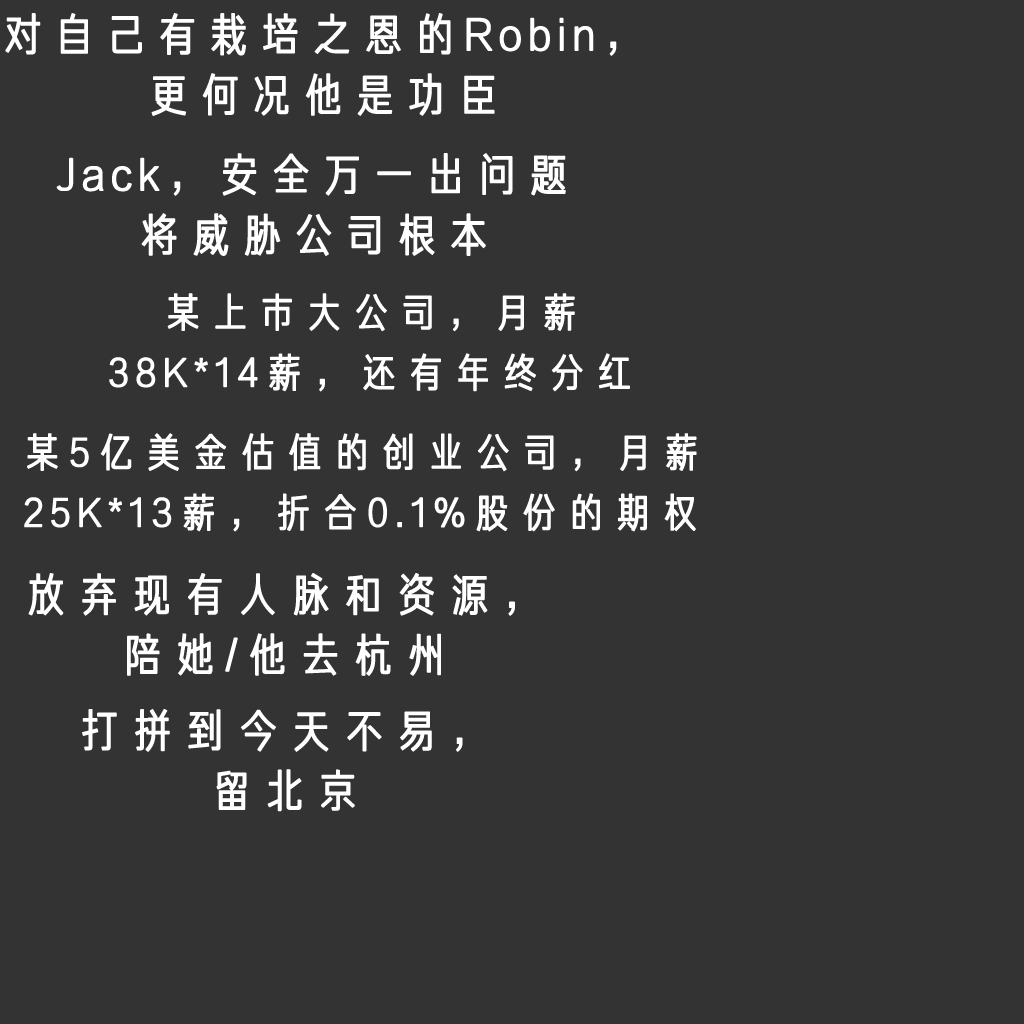
<style>
.page{position:relative;width:1024px;height:1024px;background:#333333}
.page>*{position:absolute;margin:0}
.t1{font:45.2px/60.2px "FZJHJW--GB1-0";letter-spacing:0.119em;color:#ffffff;font-weight:bold}
.t2{font:40.2px/60.2px "FZJHJW--GB1-0";letter-spacing:0.151em;color:#ffffff;font-weight:bold}
.t3{font:45.2px/60.2px "FZJHJW--GB1-0";letter-spacing:0.151em;color:#ffffff;font-weight:bold}
</style>
<div class="page">
<p class="t1" style="left:5px;top:13px;width:612px;height:103px;text-align:center">对自己有栽培之恩的Robin，<br>更何况他是功臣</p>
<p class="t1" style="left:56px;top:153px;width:510px;height:103px;text-align:center">Jack，安全万一出问题<br>将威胁公司根本</p>
<p class="t2" style="left:109px;top:293px;width:521px;height:99px;text-align:center">某上市大公司，月薪<br>38K*14薪，还有年终分红</p>
<p class="t2" style="left:24px;top:433px;width:673px;height:99px;text-align:center">某5亿美金估值的创业公司，月薪<br>25K*13薪，折合0.1%股份的期权</p>
<p class="t3" style="left:28px;top:573px;width:487px;height:103px;text-align:center">放弃现有人脉和资源，<br>陪她/他去杭州</p>
<p class="t3" style="left:82px;top:708px;width:381px;height:104px;text-align:center">打拼到今天不易，<br>留北京</p>
</div>
